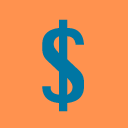
<style>
.page{position:relative;width:128px;height:128px;background:#ff924f}
.page>*{position:absolute;margin:0}
.t1{font:100px "Silom";color:#0076a3}
</style>
<div class="page">
<p class="t1" style="left:42px;top:19px;width:42px;height:93px">$</p>
</div>
